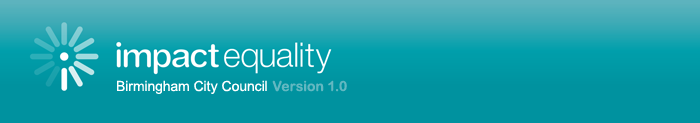
<style>
.page{position:relative;width:700px;height:123px;background:#00929f}
.page>*{position:absolute;margin:0}
.t1{font:14px "ArialMT";color:#ffffff}
.t2{font:14px "ArialRoundedMTBold";color:#63b8c1}
</style>
<div class="page">
<p class="t1" style="left:117px;top:80px;width:230px;height:14px">Birmingham City Council <span class="t2">Version 1.0</span></p>
</div>
